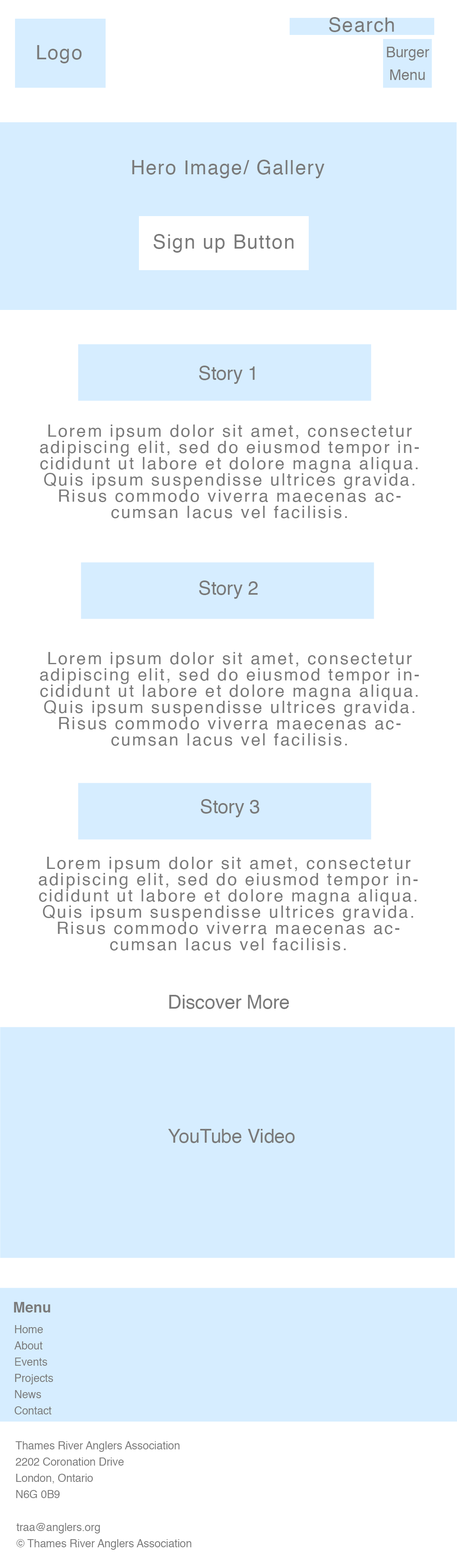
<style>
.page{position:relative;width:457px;height:1568px;background:#ffffff}
.page>*{position:absolute;margin:0}
.t1{font:19.5px "Helvetica";letter-spacing:0.055em;color:#7a7a7a}
.t2{font:14.6px/22.7px "Helvetica";letter-spacing:-0.005em;color:#7a7a7a}
.t3{font:19.1px "Helvetica";letter-spacing:-0.005em;color:#7a7a7a}
.t4{font:17.1px/16.2px "Helvetica";letter-spacing:0.095em;color:#7a7a7a}
.t5{font:14.6px "Helvetica-Bold";letter-spacing:-0.005em;color:#7a7a7a}
.t6{font:11px/16.2px "Helvetica";letter-spacing:-0.005em;color:#7a7a7a}
</style>
<div class="page">
<p class="t1" style="left:329px;top:17px;width:65px;height:15px">Search</p>
<p class="t1" style="left:37px;top:45px;width:45px;height:18px">Logo</p>
<p class="t2" style="left:387px;top:47px;width:42px;height:33px;text-align:center">Burger<br>Menu</p>
<p class="t1" style="left:132px;top:160px;width:193px;height:18px">Hero Image/ Gallery</p>
<p class="t1" style="left:154px;top:234px;width:140px;height:19px">Sign up Button</p>
<p class="t3" style="left:199px;top:366px;width:56px;height:18px">Story 1</p>
<p class="t4" style="left:40px;top:424px;width:379px;height:94px;text-align:center">Lorem ipsum dolor sit amet, consectetur adipiscing elit, sed do eiusmod tempor incididunt ut labore et dolore magna aliqua. Quis ipsum suspendisse ultrices gravida. Risus commodo viverra maecenas accumsan lacus vel facilisis.</p>
<p class="t3" style="left:199px;top:580px;width:59px;height:19px">Story 2</p>
<p class="t4" style="left:40px;top:652px;width:379px;height:94px;text-align:center">Lorem ipsum dolor sit amet, consectetur adipiscing elit, sed do eiusmod tempor incididunt ut labore et dolore magna aliqua. Quis ipsum suspendisse ultrices gravida. Risus commodo viverra maecenas accumsan lacus vel facilisis.</p>
<p class="t3" style="left:201px;top:799px;width:59px;height:18px">Story 3</p>
<p class="t4" style="left:39px;top:857px;width:379px;height:94px;text-align:center">Lorem ipsum dolor sit amet, consectetur adipiscing elit, sed do eiusmod tempor incididunt ut labore et dolore magna aliqua. Quis ipsum suspendisse ultrices gravida. Risus commodo viverra maecenas accumsan lacus vel facilisis.</p>
<p class="t3" style="left:169px;top:995px;width:120px;height:14px">Discover More</p>
<p class="t3" style="left:168px;top:1129px;width:127px;height:14px">YouTube Video</p>
<p class="t5" style="left:14px;top:1302px;width:36px;height:10px">Menu</p>
<p class="t6" style="left:14px;top:1325px;width:39px;height:89px">Home<br>About<br>Events<br>Projects<br>News<br>Contact</p>
<p class="t6" style="left:15px;top:1441px;width:165px;height:57px">Thames River Anglers Association<br>  2202 Coronation Drive<br>  London, Ontario<br>  N6G 0B9</p>
<p class="t6" style="left:16px;top:1523px;width:175px;height:27px">traa@anglers.org<br>© Thames River Anglers Association</p>
</div>
